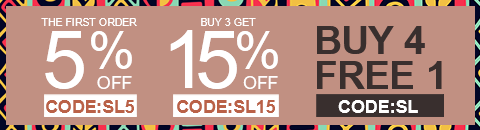
<style>
.page{position:relative;width:480px;height:130px;background:#c19082}
.page>*{position:absolute;margin:0}
.t1{font:10.6px "ArialMT";color:#ffffff;text-transform:uppercase}
.t2{font:80.6px "ArialMT";letter-spacing:-0.14em;color:#ffffff}
.t3{font:38.7px/34.8px "Arial-BoldMT";color:#392f2e;text-transform:uppercase}
.t4{font:80.6px "ArialMT";color:#ffffff}
.t5{font:52.6px "ArialMT";color:#ffffff}
.t6{font:17.6px "ArialMT";color:#ffffff}
.t7{font:17.9px "Arial-BoldMT";color:#ba6147}
.t8{font:17.8px "Arial-BoldMT";color:#ffffff}
</style>
<div class="page">
<p class="t1" style="left:41px;top:18px;width:96px;height:8px">the first order</p>
<p class="t2" style="left:170px;top:30px;width:67px;height:59px">15</p>
<p class="t1" style="left:201px;top:18px;width:55px;height:8px">Buy 3 get</p>
<p class="t3" style="left:317px;top:26px;width:125px;height:63px">Buy 4 <br>free 1</p>
<p class="t4" style="left:45px;top:31px;width:39px;height:58px">5</p>
<p class="t5" style="left:91px;top:31px;width:41px;height:38px">%</p>
<p class="t5" style="left:237px;top:31px;width:41px;height:38px">%</p>
<p class="t6" style="left:97px;top:76px;width:35px;height:13px">OFF</p>
<p class="t6" style="left:243px;top:76px;width:35px;height:13px">OFF</p>
<p class="t7" style="left:46px;top:100px;width:88px;height:13px">CODE:SL5</p>
<p class="t7" style="left:177px;top:100px;width:98px;height:13px">CODE:SL15</p>
<p class="t8" style="left:338px;top:100px;width:80px;height:13px">CODE:SL</p>
</div>
